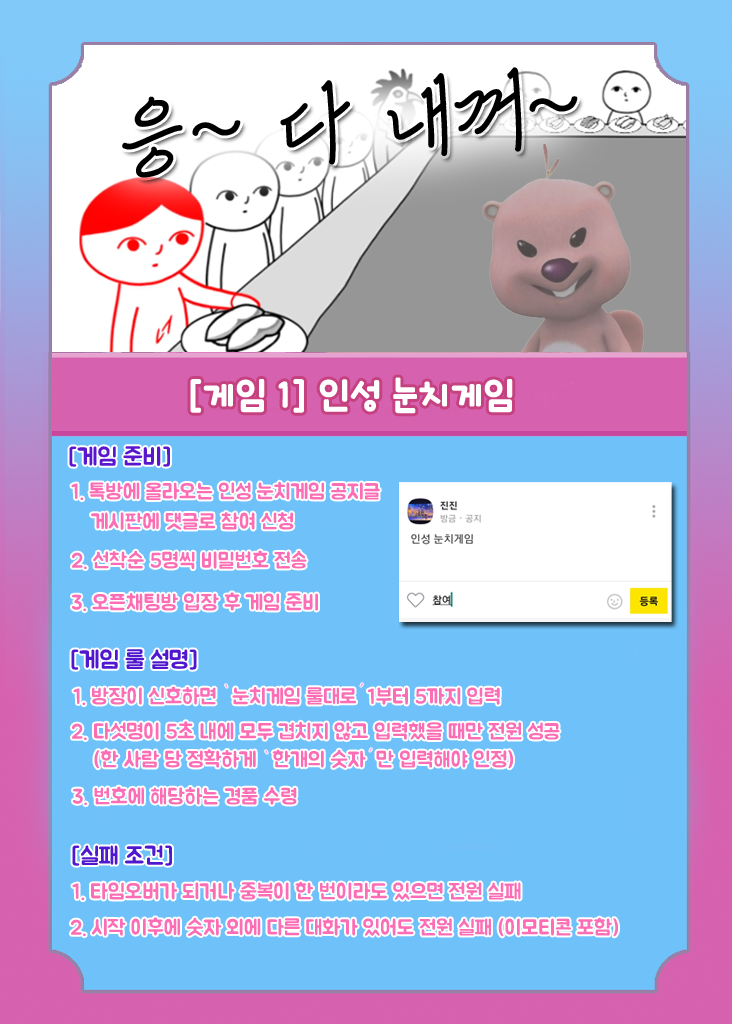
<style>
.page{position:relative;width:732px;height:1024px;background:#6ec2f9}
.page>*{position:absolute;margin:0}
.t1{font:100px "Pix_HUMoo132";color:#000000}
.t2{font:40px "icTTHayanbunpilB";color:#ffffff}
.t3{font:24px "Pix_BMJUAOTF";color:#5817ce}
.t4{font:21px "Pix_BMJUAOTF";color:#fb6db4}
.t5{font:24px "Pix_BMJUAOTF";color:#4f17ce}
.t6{font:16px "Pix_BMJUAOTF";color:#ff9fde}
.t7{font:16px "Pix_BMJUAOTF";color:#fb98ec}
.t8{font:16px "Pix_BMJUAOTF";color:#fc9ffb}
.t9{font:16px "Pix_BMJUAOTF";color:#fca7ed}
</style>
<div class="page">
<p class="t1" style="left:122px;top:67px;width:456px;height:111px;rotate:-4deg">응~ 다 내꺼~</p>
<p class="t2" style="left:190px;top:377px;width:323px;height:37px">[게임 1] 인성 눈치게임</p>
<p class="t3" style="left:69px;top:446px;width:101px;height:21px">[게임 준비]</p>
<p class="t4" style="left:71px;top:481px;width:309px;height:20px">1. 톡방에 올라오는 인성 눈치게임 공지글</p>
<p class="t4" style="left:91px;top:512px;width:203px;height:18px">게시판에 댓글로 참여 신청</p>
<p class="t4" style="left:72px;top:550px;width:235px;height:20px">2. 선착순 5명씩 비밀번호 전송</p>
<p class="t4" style="left:72px;top:592px;width:246px;height:20px">3. 오픈채팅방 입장 후 게임 준비</p>
<p class="t5" style="left:71px;top:649px;width:126px;height:21px">[게임 룰 설명]</p>
<p class="t4" style="left:73px;top:686px;width:427px;height:20px">1. 방장이 신호하면   눈치게임 룰대로  1부터 5까지 입력</p>
<p class="t6" style="left:225px;top:684px;width:3px;height:4px;rotate:-171deg">,</p>
<p class="t7" style="left:360px;top:683px;width:3px;height:4px;rotate:-9deg">,</p>
<p class="t4" style="left:72px;top:721px;width:488px;height:20px">2. 다섯명이 5초 내에 모두 겹치지 않고 입력했을 때만 전원 성공</p>
<p class="t4" style="left:94px;top:749px;width:419px;height:20px">(한 사람 당 정확하게   한개의 숫자  만 입력해야 인정)</p>
<p class="t8" style="left:265px;top:750px;width:3px;height:4px;rotate:-171deg">,</p>
<p class="t9" style="left:369px;top:748px;width:3px;height:4px;rotate:-9deg">,</p>
<p class="t4" style="left:73px;top:786px;width:224px;height:20px">3. 번호에 해당하는 경품 수령</p>
<p class="t5" style="left:72px;top:845px;width:100px;height:21px">[실패 조건]</p>
<p class="t4" style="left:72px;top:881px;width:449px;height:20px">1. 타임오버가 되거나 중복이 한 번이라도 있으면 전원 실패</p>
<p class="t4" style="left:71px;top:917px;width:547px;height:20px">2. 시작 이후에 숫자 외에 다른 대화가 있어도 전원 실패 (이모티콘 포함)</p>
</div>
